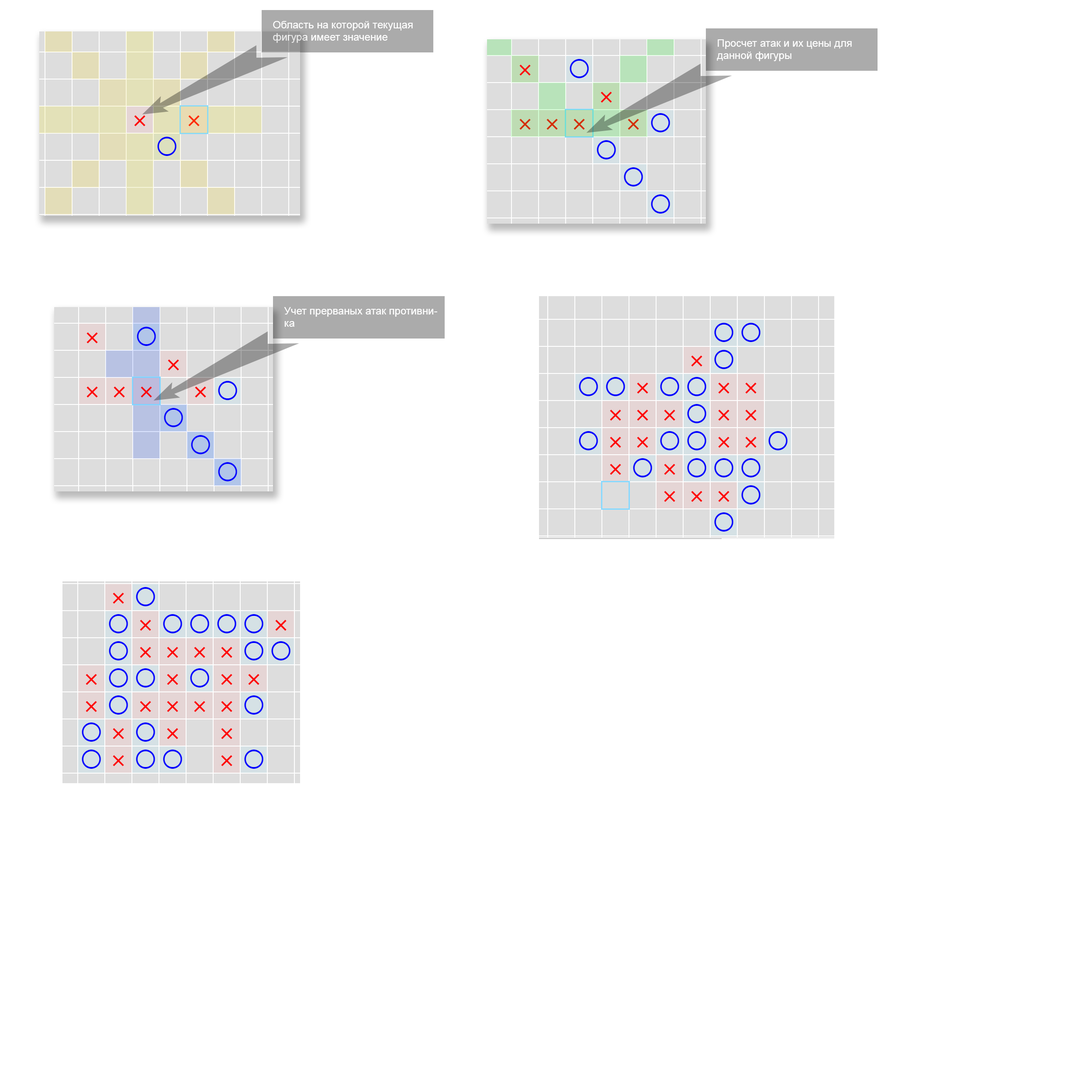
<style>
.page{position:relative;width:1092px;height:1092px;background:#ffffff}
.page>*{position:absolute;margin:0}
.t1{font:10.5px "ArialMT";color:#ffffff}
</style>
<div class="page">
<p class="t1" style="left:273px;top:21px;width:140px;height:22px">Область на которой текущая фигура имеет значение</p>
<p class="t1" style="left:717px;top:39px;width:135px;height:22px">Просчет атак и их цены для данной фигуры</p>
<p class="t1" style="left:284px;top:307px;width:153px;height:20px">Учет прерваных атак противника</p>
</div>
